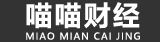
<style>
.page{position:relative;width:160px;height:42px;background:#333333}
.page>*{position:absolute;margin:0}
.t1{font:26.7px "MicrosoftYaHei-Bold";letter-spacing:0.095em;color:#ffffff}
.t2{font:9.3px "MicrosoftYaHei";letter-spacing:0.115em;color:#ffffff}
</style>
<div class="page">
<p class="t1" style="left:26px;top:2px;width:114px;height:27px">喵喵财经</p>
<p class="t2" style="left:26px;top:32px;width:114px;height:8px">MIAO MIAN CAI JING</p>
</div>
